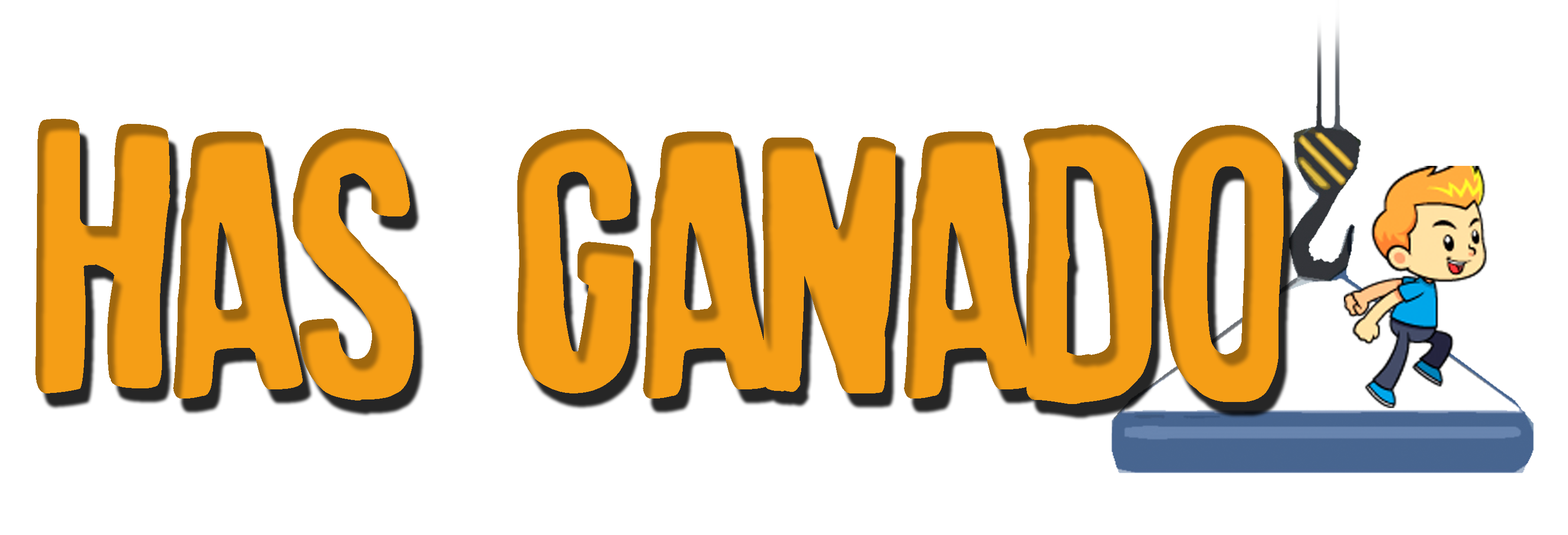
<style>
.page{position:relative;width:1568px;height:535px;background:#ffffff}
.page>*{position:absolute;margin:0}
.t1{font:366.3px "camellodespit";color:#f59e16}
</style>
<div class="page">
<p class="t1" style="left:35px;top:119px;width:1249px;height:285px">HAS GANADO</p>
</div>
